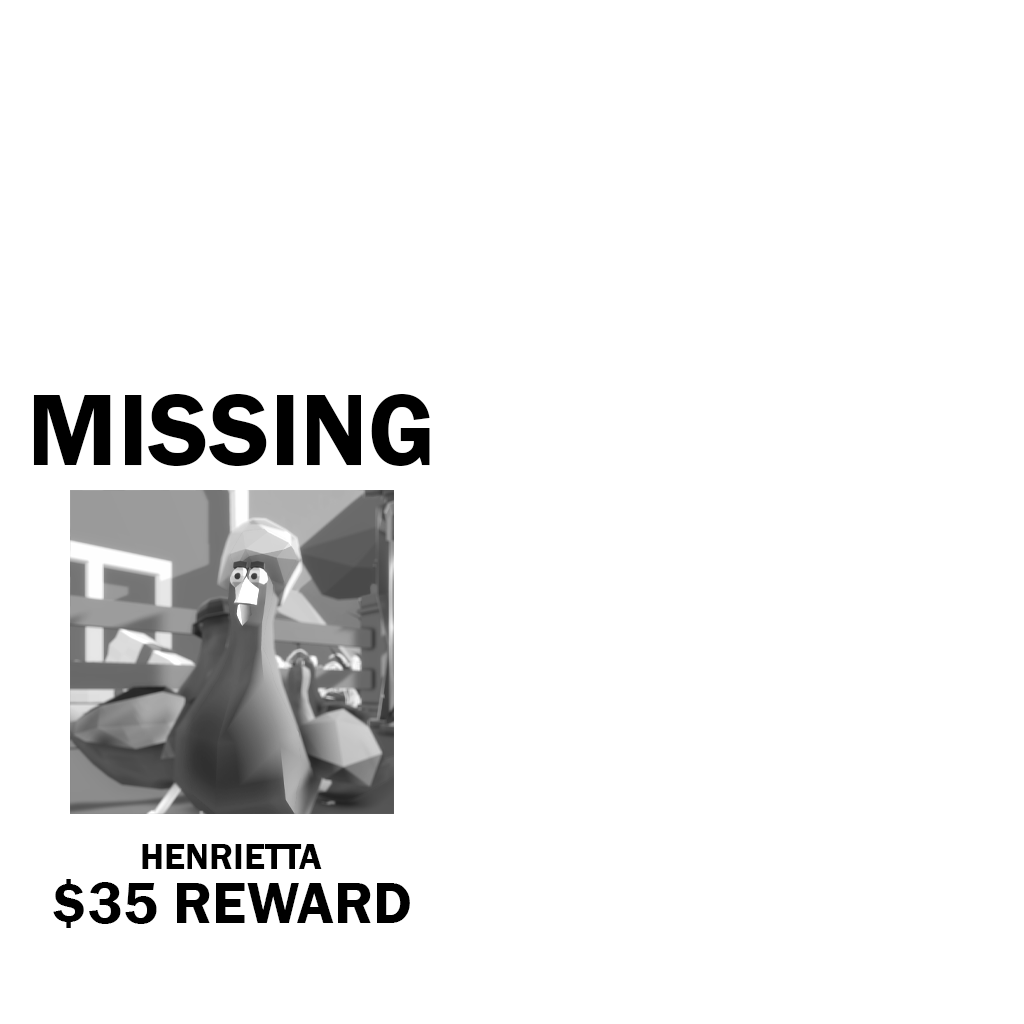
<style>
.page{position:relative;width:1024px;height:1024px;background:#ffffff}
.page>*{position:absolute;margin:0}
.t1{font:105px "FranklinGothic-Demi";color:#000000}
.t2{font:37px "FranklinGothic-Demi";color:#000000}
.t3{font:60px "FranklinGothic-Demi";color:#000000}
</style>
<div class="page">
<p class="t1" style="left:33px;top:394px;width:397px;height:72px">MISSING</p>
<p class="t2" style="left:142px;top:844px;width:180px;height:25px">HENRIETTA</p>
<p class="t3" style="left:53px;top:879px;width:357px;height:49px">$35 REWARD</p>
</div>
